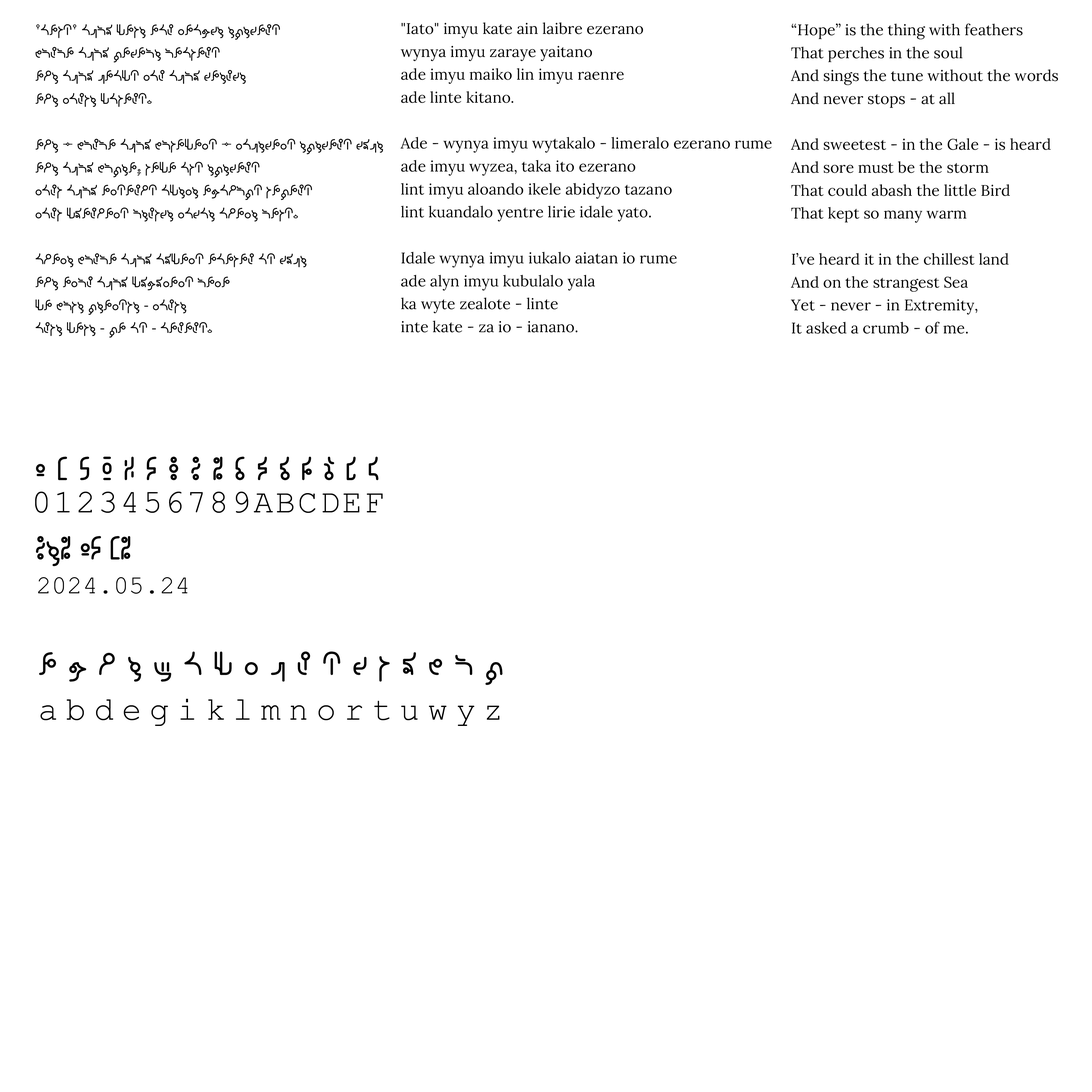
<style>
.page{position:relative;width:1092px;height:1092px;background:#ffffff}
.page>*{position:absolute;margin:0}
.t1{font:15.3px/22.9px "Songlang_Script_B";color:#000000}
.t2{font:15.3px/22.9px "MyriadPro-Regular";color:#000000}
.t3{font:15.3px/22.9px "Lora-Regular";color:#000000}
.t4{font:33.1px "Songlang_Script_B";letter-spacing:0.35em;color:#000000}
.t5{font:33.1px "CourierNewPSMT";letter-spacing:0.07em;color:#000000}
.t6{font:33.1px "Songlang_Script_B";color:#000000}
.t7{font:25.7px "CourierNewPSMT";color:#000000}
.t8{font:33.1px "CourierNewPSMT";letter-spacing:0.24em;color:#000000}
</style>
<div class="page">
<p class="t1" style="left:35px;top:24px;width:348px;height:314px">"iato" imyu kate ain laibre ezerano<br>wynya imyu zaraye yaitano<br>ade imyu maiko lin imyu raenre<br>ade linte kitano.<br><br>ade — wynya imyu wytakalo — limeralo ezerano rume<br>ade imyu wyzea, taka ito ezerano<br>lint imyu aloando ikele abidyzo tazano<br>lint kuandalo yentre lirie idale yato.<br><br>idale wynya imyu iukalo aiatan io rume  <br>ade alyn imyu kubulalo yala  <br>ka wyte zealote <span class="t2">-</span> linte  <br>inte kate <span class="t2">-</span> za io <span class="t2">-</span> ianano.</p>
<p class="t3" style="left:400px;top:22px;width:372px;height:310px">"Iato" imyu kate ain laibre ezerano<br>wynya imyu zaraye yaitano<br>ade imyu maiko lin imyu raenre<br>ade linte kitano.<br><br>Ade - wynya imyu wytakalo - limeralo ezerano rume<br>ade imyu wyzea, taka ito ezerano<br>lint imyu aloando ikele abidyzo tazano<br>lint kuandalo yentre lirie idale yato.<br><br>Idale wynya imyu iukalo aiatan io rume<br>ade alyn imyu kubulalo yala<br>ka wyte zealote - linte<br>inte kate - za io - ianano.</p>
<p class="t3" style="left:791px;top:23px;width:267px;height:311px">“Hope” is the thing with feathers<br>That perches in the soul<br>And sings the tune without the words<br>And never stops - at all<br><br>And sweetest - in the Gale - is heard<br>And sore must be the storm<br>That could abash the little Bird<br>That kept so many warm<br><br>I’ve heard it in the chillest land<br>And on the strangest Sea<br>Yet - never - in Extremity,<br>It asked a crumb - of me.</p>
<p class="t4" style="left:36px;top:457px;width:343px;height:23px">0123456789ABCDEF</p>
<p class="t5" style="left:35px;top:492px;width:348px;height:21px">0123456789ABCDEF</p>
<p class="t6" style="left:36px;top:536px;width:94px;height:30px">7e8 05 18</p>
<p class="t7" style="left:38px;top:577px;width:149px;height:17px">2024.05.24</p>
<p class="t4" style="left:39px;top:651px;width:463px;height:34px">abdegiklmnortuwyz</p>
<p class="t8" style="left:40px;top:699px;width:460px;height:27px">abdegiklmnortuwyz</p>
</div>
